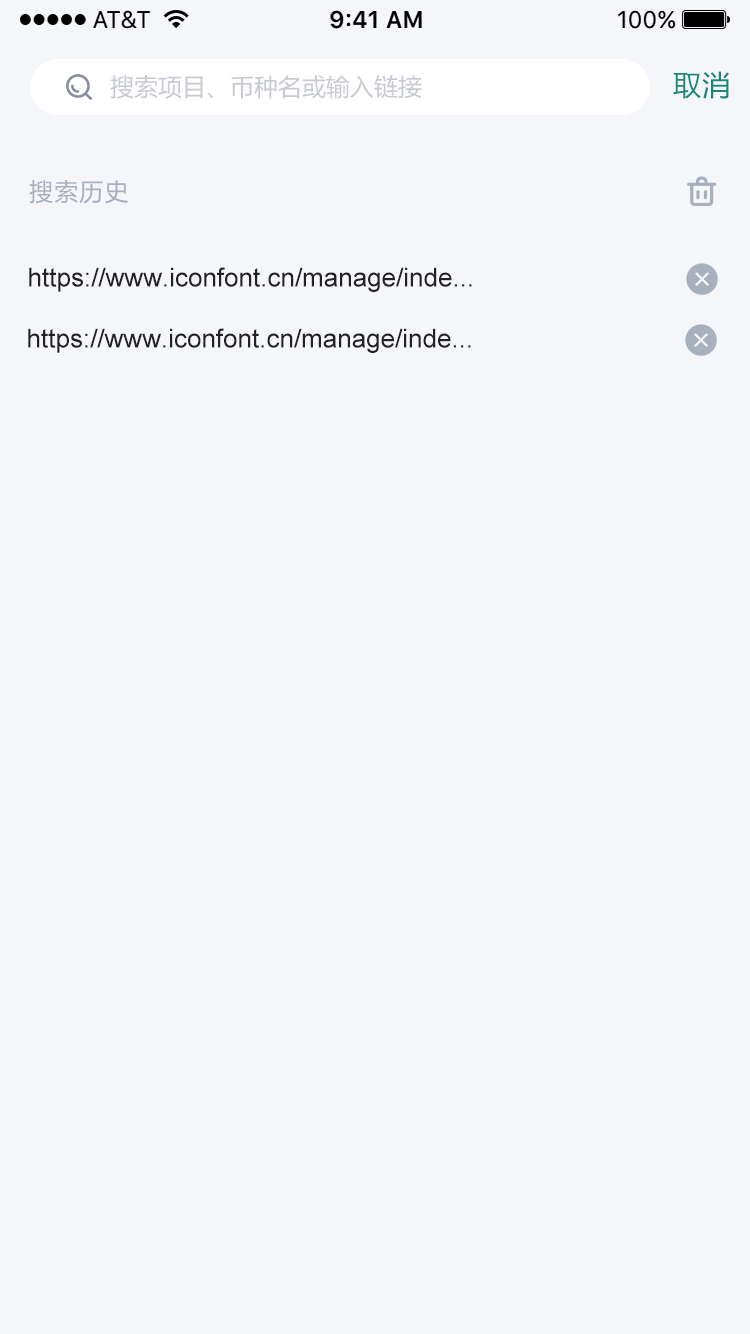
<style>
.page{position:relative;width:750px;height:1334px;background:#f5f6fa}
.page>*{position:absolute;margin:0}
.t1{font:24px "MicrosoftYaHei";color:#c8cad2}
.t2{font:28px "MicrosoftYaHei";letter-spacing:0.05em;color:#158878}
.t3{font:24px "MicrosoftYaHei";letter-spacing:0.05em;color:#a7b0bc}
.t4{font:26px "ArialMT";color:#222222}
</style>
<div class="page">
<p class="t1" style="left:110px;top:75px;width:312px;height:24px">搜索项目、币种名或输入链接</p>
<p class="t2" style="left:673px;top:71px;width:56px;height:28px">取消</p>
<p class="t3" style="left:29px;top:180px;width:99px;height:24px">搜索历史</p>
<p class="t4" style="left:29px;top:267px;width:443px;height:25px">https://www.iconfont.cn/manage/inde...</p>
<p class="t4" style="left:28px;top:328px;width:443px;height:25px">https://www.iconfont.cn/manage/inde...</p>
</div>
